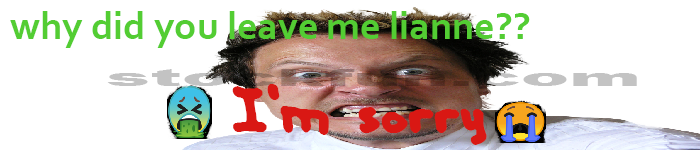
<style>
.page{position:relative;width:700px;height:150px;background:#ffffff}
.page>*{position:absolute;margin:0}
.t1{font:40px "Corbel-Bold";color:#53cd33}
.t2{font:72px "HandMeDownS-BRK-";color:#d91814}
</style>
<div class="page">
<p class="t1" style="left:10px;top:11px;width:520px;height:37px">why did you leave me lianne??</p>
<p class="t2" style="left:232px;top:84px;width:255px;height:61px">I’m sorry</p>
</div>
